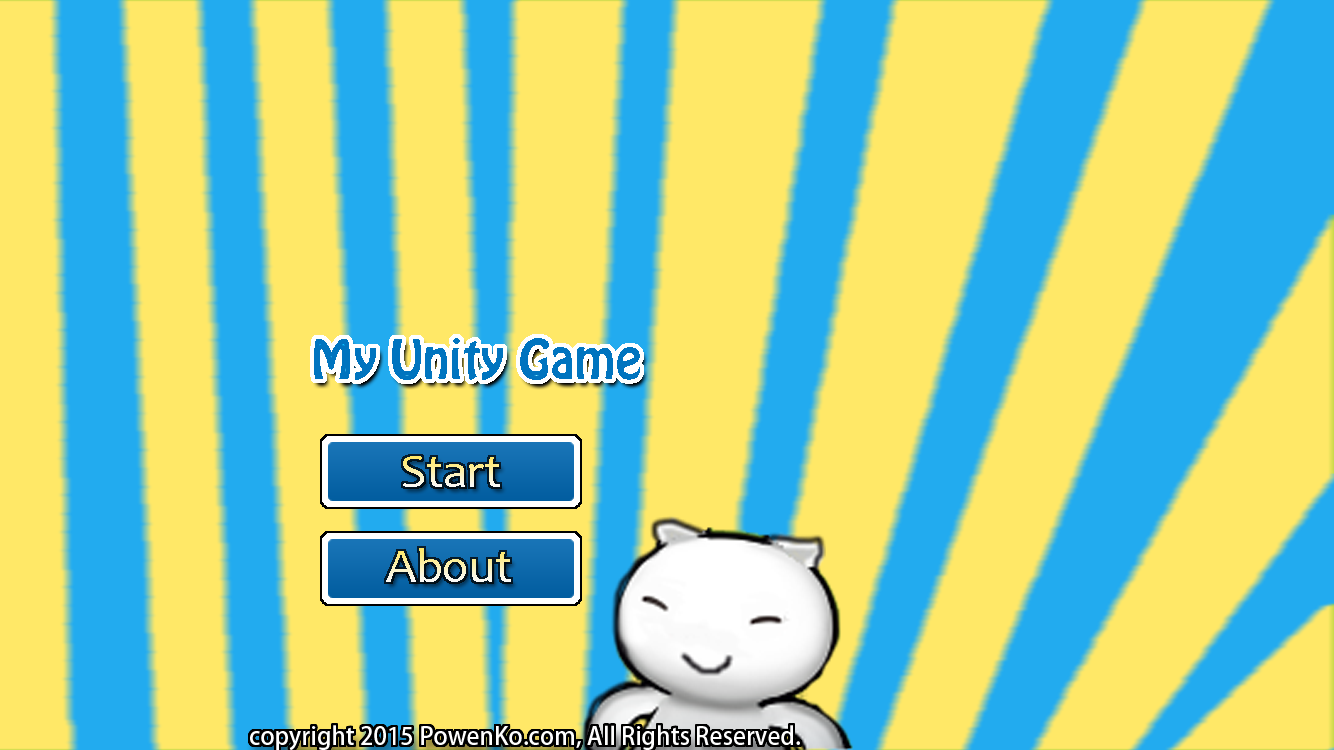
<style>
.page{position:relative;width:1334px;height:750px;background:#ffe867}
.page>*{position:absolute;margin:0}
.t1{font:48px "HoboStd";color:#0074bf}
.t2{font:48px "Candara"}
.t3{font:24px "AdobeFanHeitiStd-Bold";color:#ffffff}
</style>
<div class="page">
<p class="t1" style="left:314px;top:338px;width:326px;height:42px">My Unity Game</p>
<p class="t2" style="left:403px;top:456px;width:97px;height:31px">Start</p>
<p class="t2" style="left:386px;top:548px;width:125px;height:34px">About</p>
<p class="t3" style="left:250px;top:725px;width:550px;height:26px">copyright 2015 PowenKo.com, All Rights Reserved.</p>
</div>
